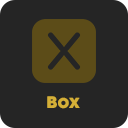
<style>
.page{position:relative;width:128px;height:128px;background:#252525}
.page>*{position:absolute;margin:0}
.t1{font:15.6px "CocogooseProTrial-Bold";color:#d4af37}
</style>
<div class="page">
<p class="t1" style="left:47px;top:96px;width:33px;height:13px">Box</p>
</div>
